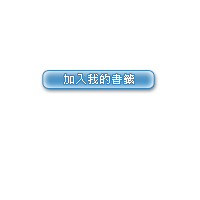
<style>
.page{position:relative;width:200px;height:200px;background:#ffffff}
.page>*{position:absolute;margin:0}
.t1{font:11px "MingLiU";color:#ffffff}
</style>
<div class="page">
<p class="t1" style="left:64px;top:74px;width:70px;height:10px">加入我的書籤</p>
</div>
